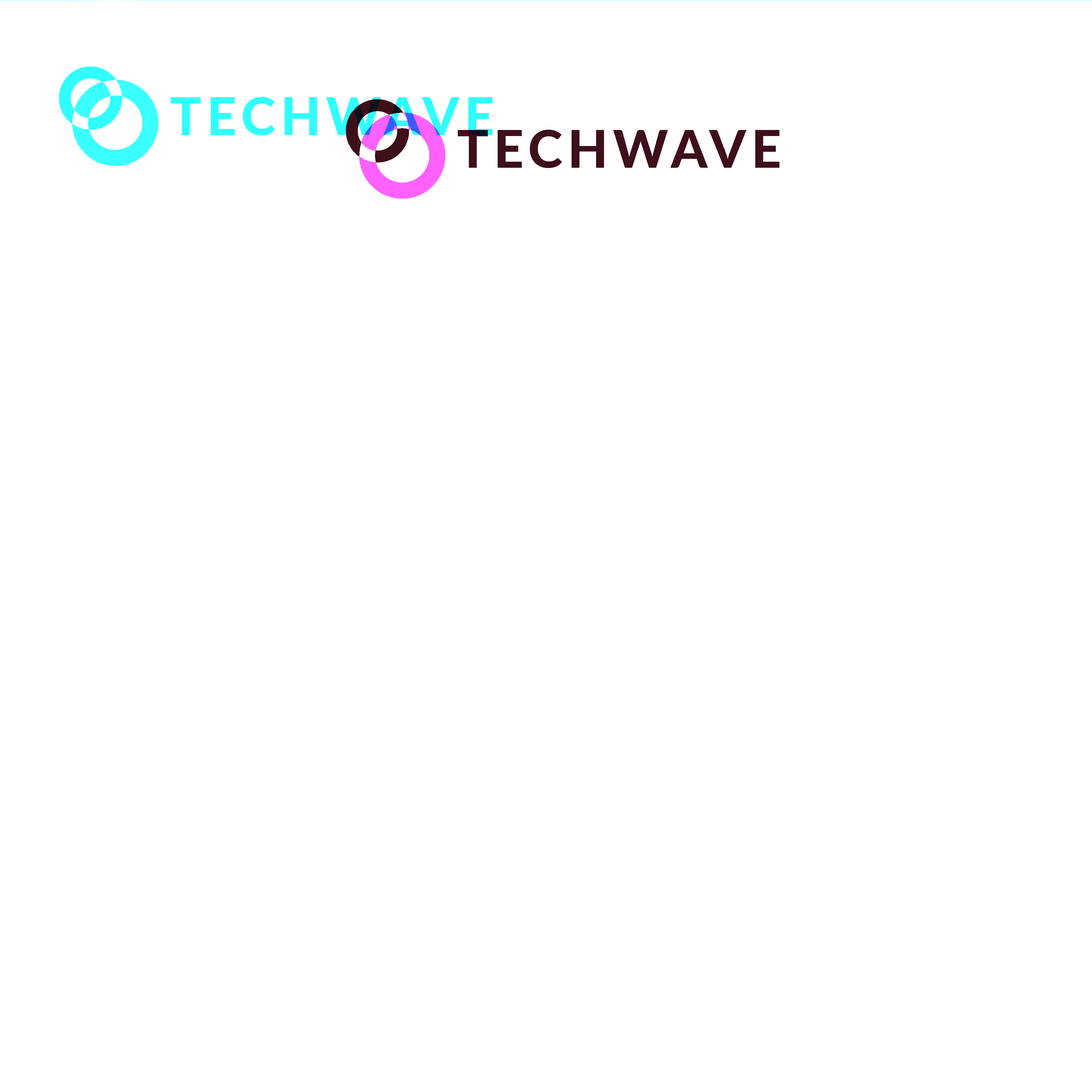
<style>
.page{position:relative;width:1092px;height:1092px;background:#ffffff}
.page>*{position:absolute;margin:0}
.t1{font:52.1px "Lato-Heavy";letter-spacing:0.1em;color:#2fffff}
</style>
<div class="page">
<p class="t1" style="left:171px;top:97px;width:322px;height:38px">TECHWAVE</p>
</div>
